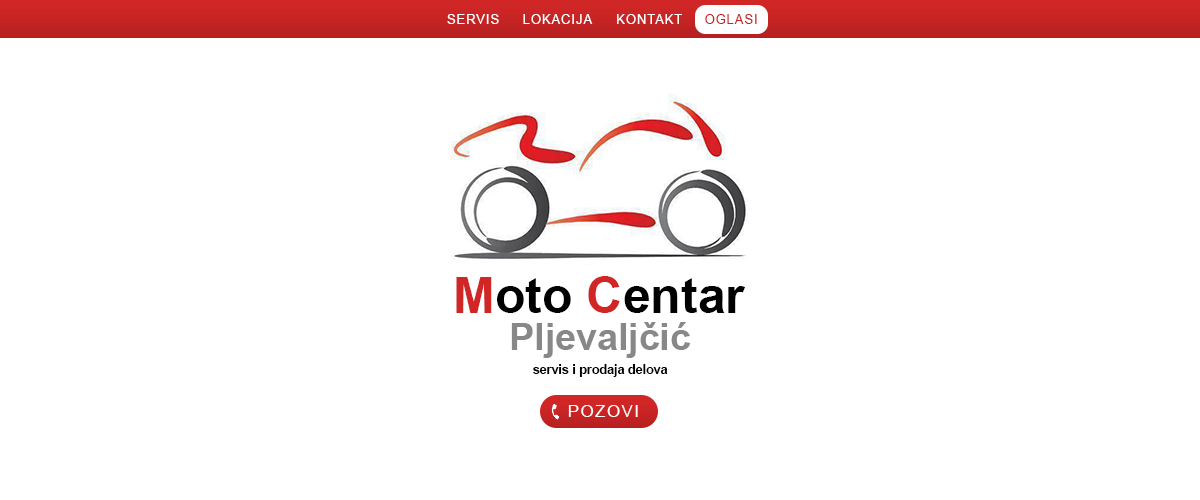
<style>
.page{position:relative;width:1200px;height:500px;background:#ffffff}
.page>*{position:absolute;margin:0}
.t1{font:12.5px "ArialMT";letter-spacing:0.1em;color:#fefefe}
.t2{font:12.5px "ArialMT";letter-spacing:0.1em;color:#c92424}
.t3{font:50px "Arial-BoldMT";color:#000000}
.t4{font:50px "Arial-BoldMT";color:#d02626}
.t5{font:37.5px "Arial-BoldMT";color:#888888}
.t6{font:12.5px "Arial-BoldMT";color:#000000}
.t7{font:16.7px "ArialMT";letter-spacing:0.1em;color:#fefefe}
</style>
<div class="page">
<p class="t1" style="left:447px;top:14px;width:52px;height:10px">SERVIS</p>
<p class="t1" style="left:523px;top:14px;width:70px;height:10px">LOKACIJA</p>
<p class="t1" style="left:617px;top:14px;width:65px;height:10px">KONTAKT</p>
<p class="t2" style="left:705px;top:14px;width:52px;height:10px">OGLASI</p>
<p class="t3" style="left:456px;top:276px;width:289px;height:37px"><span class="t4">M</span>oto <span class="t4">C</span>entar</p>
<p class="t5" style="left:511px;top:322px;width:180px;height:36px">Pljevaljčić</p>
<p class="t6" style="left:533px;top:364px;width:135px;height:13px">servis i prodaja delova</p>
<p class="t7" style="left:568px;top:405px;width:70px;height:12px">POZOVI</p>
</div>
